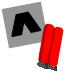
<style>
.page{position:relative;width:64px;height:71px;background:#ffffff}
.page>*{position:absolute;margin:0}
.t1{font:60px "ErasITC-Bold";color:#000000;font-weight:bold}
</style>
<div class="page">
<p class="t1" style="left:11px;top:11px;width:31px;height:27px;rotate:-12deg">^</p>
</div>
